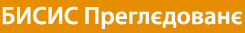
<style>
.page{position:relative;width:245px;height:33px;background:#e68d00}
.page>*{position:absolute;margin:0}
.t1{font:25px "MyriadPro-Semibold";color:#ffffff}
</style>
<div class="page">
<p class="t1" style="left:2px;top:6px;width:240px;height:23px">БИСИС Прeглєдованє</p>
</div>
